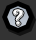
<style>
.page{position:relative;width:36px;height:40px;background:#333333}
.page>*{position:absolute;margin:0}
.t1{font:24.7px "Algerian";color:#ffffff}
</style>
<div class="page">
<p class="t1" style="left:13px;top:9px;width:11px;height:17px">?</p>
</div>
